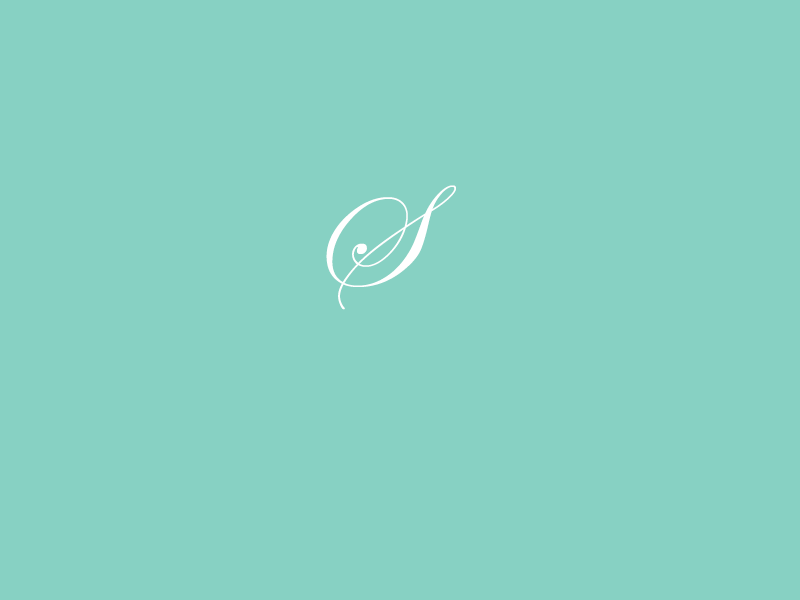
<style>
.page{position:relative;width:800px;height:600px;background:#87d1c3}
.page>*{position:absolute;margin:0}
.t1{font:150px "EdwardianScriptITC";color:#ffffff}
</style>
<div class="page">
<p class="t1" style="left:326px;top:185px;width:130px;height:125px">S</p>
</div>
